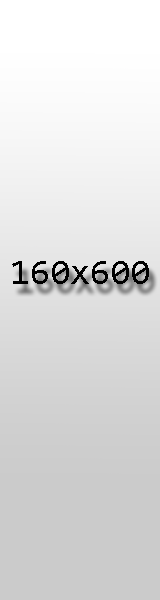
<style>
.page{position:relative;width:160px;height:600px;background:#cbcbcb}
.page>*{position:absolute;margin:0}
.t1{font:36px "Consolas";color:#000000}
</style>
<div class="page">
<p class="t1" style="left:12px;top:261px;width:137px;height:23px">160x600</p>
</div>
